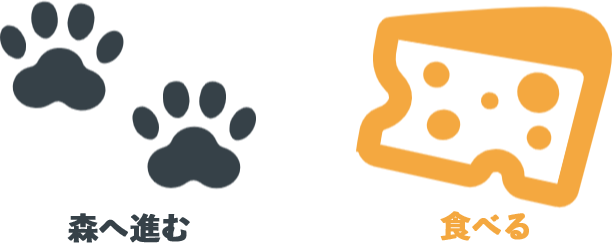
<style>
.page{position:relative;width:612px;height:243px;background:#ffffff}
.page>*{position:absolute;margin:0}
.t1{font:30px "Toppan-BunkyuMidashiGoStd-EB";letter-spacing:0.005em;color:#364148;font-weight:bold}
.t2{font:30px "Toppan-BunkyuMidashiGoStd-EB";letter-spacing:0.005em;color:#f4a840;font-weight:bold}
</style>
<div class="page">
<p class="t1" style="left:67px;top:213px;width:123px;height:30px">森へ進む</p>
<p class="t2" style="left:440px;top:211px;width:89px;height:30px">食べる</p>
</div>
